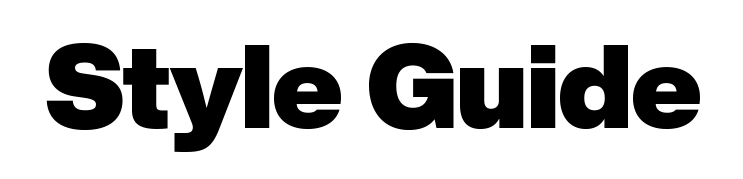
<style>
.page{position:relative;width:743px;height:179px;background:#ffffff}
.page>*{position:absolute;margin:0}
.t1{font:116.7px "HelveticaNowDisplay-XBlk";letter-spacing:-0.01em;color:#000000}
</style>
<div class="page">
<p class="t1" style="left:46px;top:42px;width:654px;height:110px">Style Guide</p>
</div>
